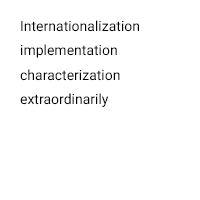
<style>
.page{position:relative;width:200px;height:200px;background:#ffffff}
.page>*{position:absolute;margin:0}
.t1{font:14px "Roboto-Regular";color:#000000}
</style>
<div class="page">
<p class="t1" style="left:20px;top:20px;width:119px;height:87px">Internationalization implementation characterization extraordinarily</p>
</div>
